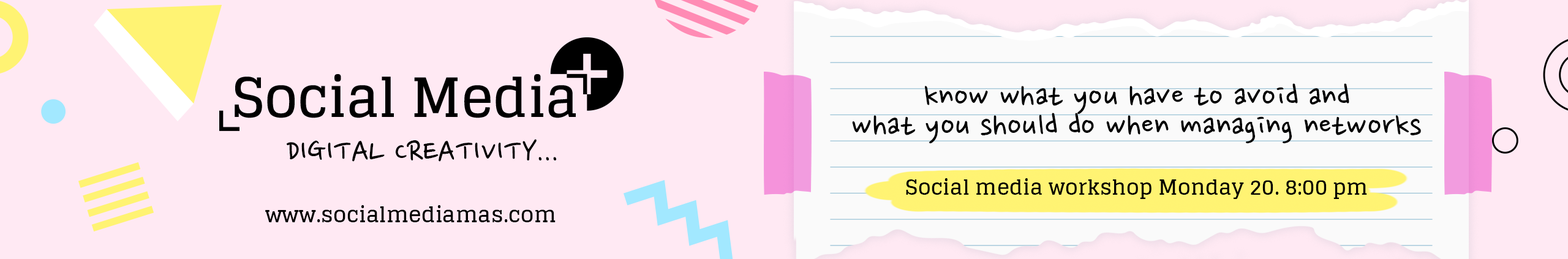
<style>
.page{position:relative;width:1568px;height:259px;background:#ffe9f3}
.page>*{position:absolute;margin:0}
.t1{font:36.4px/29.8px "NanumPen";color:#000000}
.t2{font:36.5px "NanumPen";color:#000000;text-transform:uppercase}
.t3{font:21.1px "Glegoo-Bold";color:#000000}
.t4{font:21.6px "Glegoo-Bold";color:#000000}
</style>
<div class="page">
<p class="t1" style="left:852px;top:83px;width:569px;height:60px;text-align:center">know what you have to avoid and<br>what you should do when managing networks</p>
<p class="t2" style="left:287px;top:139px;width:270px;height:23px">Digital creativity...</p>
<p class="t3" style="left:906px;top:178px;width:461px;height:21px">Social media workshop Monday 20. 8:00 pm</p>
<p class="t4" style="left:265px;top:205px;width:291px;height:17px">www.socialmediamas.com</p>
</div>
